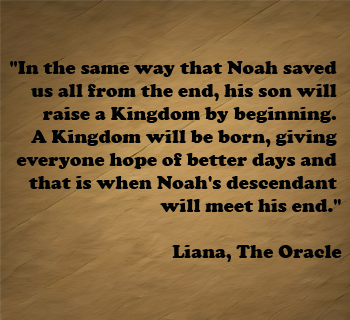
<style>
.page{position:relative;width:350px;height:320px}
.page>*{position:absolute;margin:0}
.t1{font:19.3px "CooperBlack";color:#010204}
</style>
<div class="page">
<p class="t1" style="left:10px;top:61px;width:332px;height:201px;text-align:right">"In the same way that Noah saved <br>us all from the end, his son will <br>raise a Kingdom by beginning. <br>A Kingdom will be born, giving <br>everyone hope of better days and <br>that is when Noah's descendant <br>will meet his end."<br><br>Liana, The Oracle</p>
</div>
